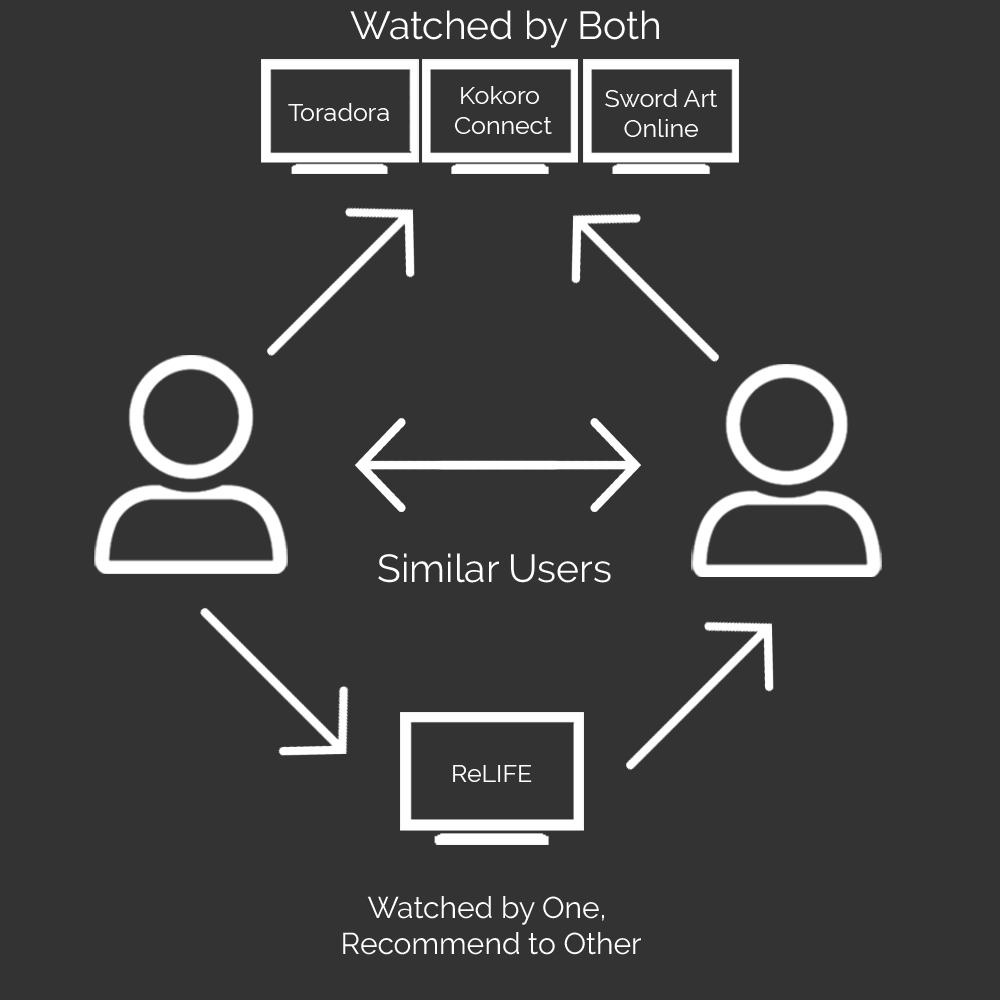
<style>
.page{position:relative;width:1000px;height:1000px;background:#333333}
.page>*{position:absolute;margin:0}
.t1{font:39.1px "Raleway-Regular";color:#ffffff}
.t2{font:25px "Raleway-Regular";color:#ffffff}
.t3{font:30px "Raleway-Regular";color:#ffffff}
</style>
<div class="page">
<p class="t1" style="left:350px;top:10px;width:309px;height:38px">Watched by Both</p>
<p class="t2" style="left:454px;top:86px;width:98px;height:48px;text-align:center">Kokoro <br>Connect</p>
<p class="t2" style="left:605px;top:89px;width:113px;height:48px;text-align:center">Sword Art<br>Online</p>
<p class="t2" style="left:288px;top:103px;width:101px;height:18px">Toradora</p>
<p class="t1" style="left:378px;top:553px;width:233px;height:30px">Similar Users</p>
<p class="t2" style="left:453px;top:765px;width:79px;height:17px">ReLIFE</p>
<p class="t3" style="left:343px;top:896px;width:298px;height:59px;text-align:center">Watched by One, <br>Recommend to Other</p>
</div>
